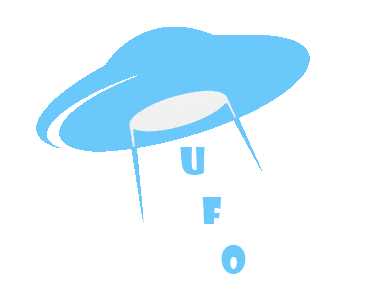
<style>
.page{position:relative;width:374px;height:297px;background:#ffffff}
.page>*{position:absolute;margin:0}
.t1{font:36px "ShowcardGothic-Reg";color:#6ac8fb}
</style>
<div class="page">
<p class="t1" style="left:180px;top:147px;width:25px;height:28px">U</p>
<p class="t1" style="left:202px;top:197px;width:20px;height:27px">F</p>
<p class="t1" style="left:221px;top:245px;width:25px;height:29px">O</p>
</div>
